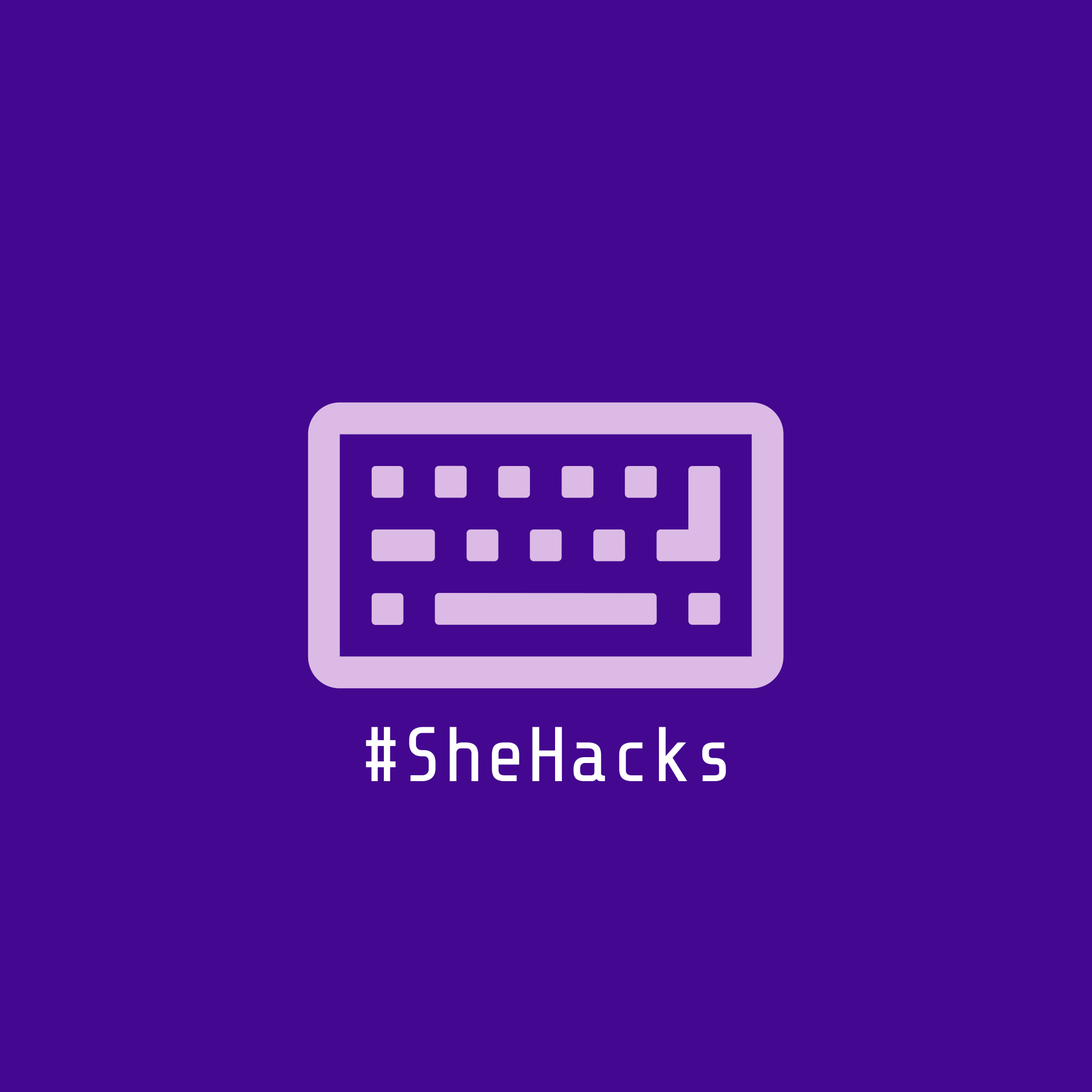
<style>
.page{position:relative;width:1092px;height:1092px;background:#440790}
.page>*{position:absolute;margin:0}
.t1{font:77.2px "ShareTechMono-Regular";color:#ffffff}
</style>
<div class="page">
<p class="t1" style="left:366px;top:727px;width:360px;height:54px">#SheHacks</p>
</div>
